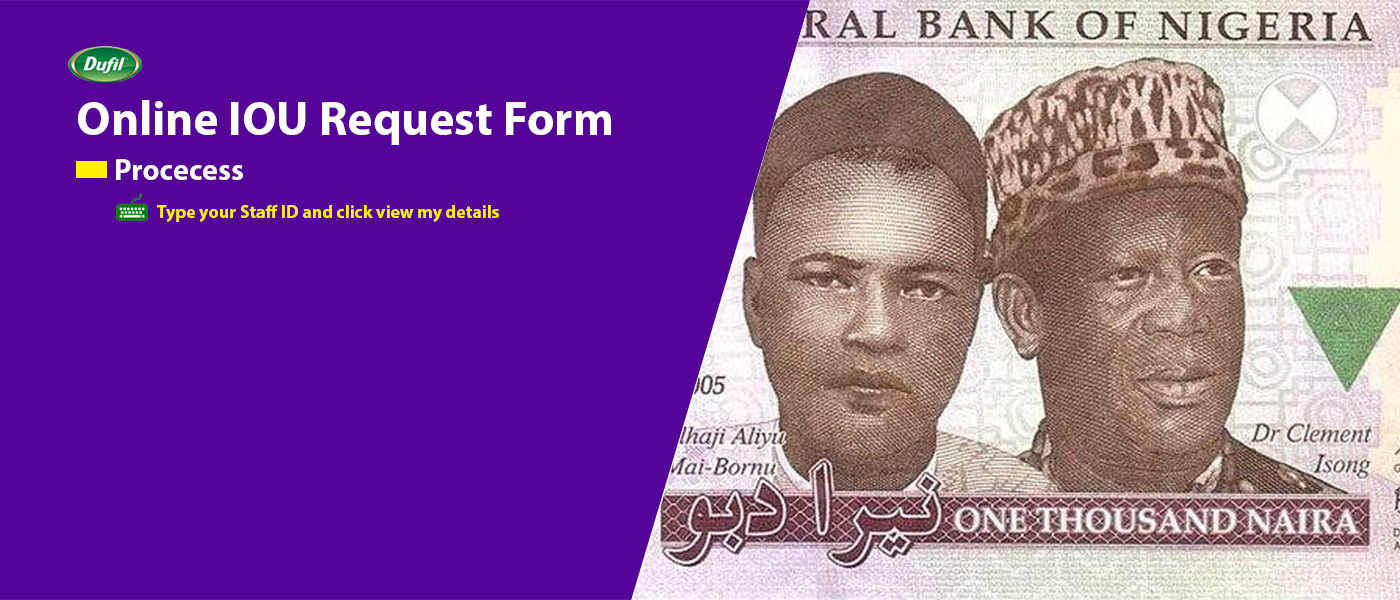
<style>
.page{position:relative;width:1400px;height:600px;background:#540497}
.page>*{position:absolute;margin:0}
.t1{font:48px "MyriadPro-Bold";color:#fefdff}
.t2{font:30px "MyriadPro-Bold";color:#fefdff}
.t3{font:18px "MyriadPro-Bold";color:#fff200}
</style>
<div class="page">
<p class="t1" style="left:78px;top:100px;width:533px;height:45px">Online IOU Request Form</p>
<p class="t2" style="left:116px;top:159px;width:127px;height:21px">Procecess</p>
<p class="t3" style="left:157px;top:205px;width:342px;height:17px">Type your Staff ID and click view my details</p>
</div>
